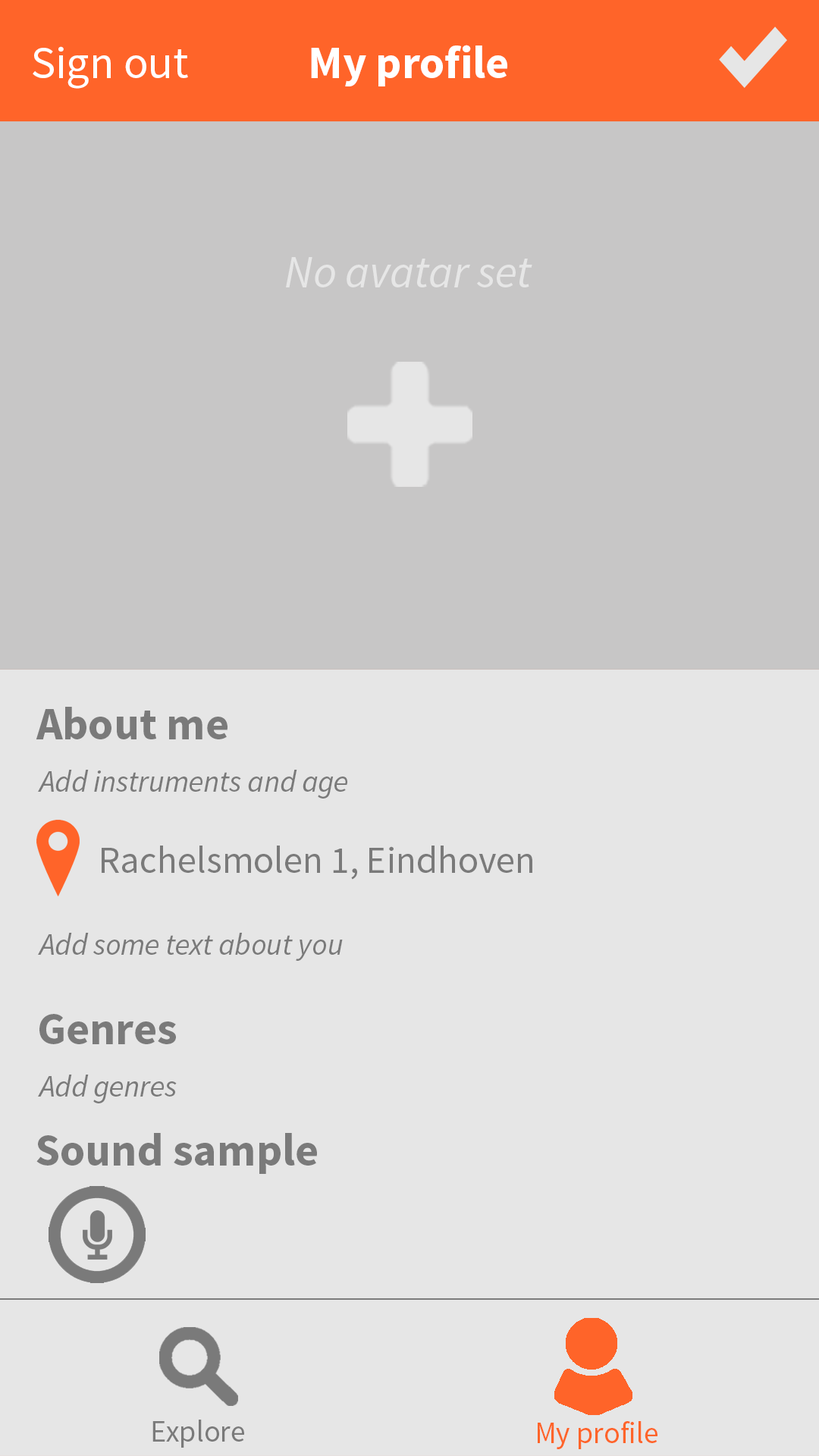
<style>
.page{position:relative;width:819px;height:1456px;background:#e6e6e6}
.page>*{position:absolute;margin:0}
.t1{font:45.5px "SourceSansPro-Regular";color:#ffffff}
.t2{font:45.5px "SourceSansPro-Bold";color:#ffffff}
.t3{font:45.5px "SourceSansPro-It";color:#e6e6e6}
.t4{font:45.5px "SourceSansPro-Bold";color:#7a7a7a}
.t5{font:30.3px "SourceSansPro-It";color:#7a7a7a}
.t6{font:37.9px "SourceSansPro-Regular";color:#7a7a7a}
.t7{font:30.3px "SourceSansPro-Regular";color:#7a7a7a}
.t8{font:30.3px "SourceSansPro-Regular";color:#ff6429}
</style>
<div class="page">
<p class="t1" style="left:33px;top:46px;width:155px;height:43px">Sign out</p>
<p class="t2" style="left:311px;top:45px;width:196px;height:41px">My profile</p>
<p class="t3" style="left:286px;top:257px;width:246px;height:30px">No avatar set</p>
<p class="t4" style="left:36px;top:707px;width:191px;height:32px">About me</p>
<p class="t5" style="left:38px;top:770px;width:309px;height:29px">Add instruments and age</p>
<p class="t6" style="left:102px;top:846px;width:430px;height:34px">Rachelsmolen 1, Eindhoven</p>
<p class="t5" style="left:38px;top:933px;width:305px;height:28px">Add some text about you</p>
<p class="t4" style="left:39px;top:1014px;width:137px;height:30px">Genres</p>
<p class="t5" style="left:38px;top:1075px;width:139px;height:28px">Add genres</p>
<p class="t4" style="left:36px;top:1133px;width:281px;height:41px">Sound sample</p>
<p class="t7" style="left:152px;top:1420px;width:92px;height:28px">Explore</p>
<p class="t8" style="left:538px;top:1421px;width:119px;height:28px">My profile</p>
</div>
